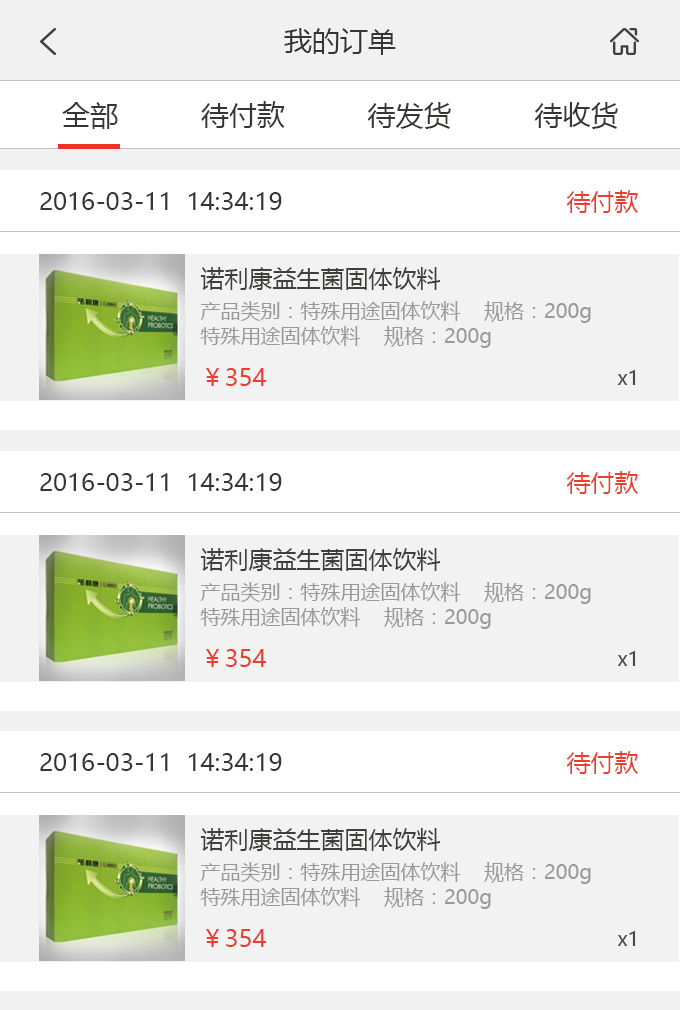
<style>
.page{position:relative;width:680px;height:1010px;background:#ffffff}
.page>*{position:absolute;margin:0}
.t1{font:28px "MicrosoftYaHei";color:#363533}
.t2{font:24px "MicrosoftYaHei";color:#363533}
.t3{font:24px "MicrosoftYaHei";color:#eb3d32}
.t4{font:24px "MicrosoftYaHei";color:#403f3d}
.t5{font:20px/25px "MicrosoftYaHei";color:#999999}
.t6{font:20px "MicrosoftYaHei";color:#4a4947}
</style>
<div class="page">
<p class="t1" style="left:284px;top:28px;width:112px;height:27px">我的订单</p>
<p class="t1" style="left:62px;top:101px;width:556px;height:28px">全部          待付款          待发货          待收货</p>
<p class="t2" style="left:40px;top:192px;width:242px;height:18px">2016-03-11  14:34:19</p>
<p class="t3" style="left:566px;top:190px;width:72px;height:23px">待付款</p>
<p class="t4" style="left:200px;top:267px;width:241px;height:23px">诺利康益生菌固体饮料</p>
<p class="t5" style="left:200px;top:301px;width:391px;height:47px">产品类别：特殊用途固体饮料    规格：200g<br>特殊用途固体饮料    规格：200g</p>
<p class="t3" style="left:206px;top:368px;width:61px;height:18px">￥354</p>
<p class="t6" style="left:617px;top:370px;width:19px;height:15px">x1</p>
<p class="t2" style="left:40px;top:473px;width:242px;height:18px">2016-03-11  14:34:19</p>
<p class="t3" style="left:566px;top:471px;width:72px;height:23px">待付款</p>
<p class="t4" style="left:200px;top:548px;width:241px;height:23px">诺利康益生菌固体饮料</p>
<p class="t5" style="left:200px;top:582px;width:391px;height:47px">产品类别：特殊用途固体饮料    规格：200g<br>特殊用途固体饮料    规格：200g</p>
<p class="t3" style="left:206px;top:649px;width:61px;height:18px">￥354</p>
<p class="t6" style="left:617px;top:651px;width:19px;height:15px">x1</p>
<p class="t2" style="left:40px;top:753px;width:242px;height:18px">2016-03-11  14:34:19</p>
<p class="t3" style="left:566px;top:751px;width:72px;height:23px">待付款</p>
<p class="t4" style="left:200px;top:828px;width:241px;height:23px">诺利康益生菌固体饮料</p>
<p class="t5" style="left:200px;top:862px;width:391px;height:47px">产品类别：特殊用途固体饮料    规格：200g<br>特殊用途固体饮料    规格：200g</p>
<p class="t3" style="left:206px;top:929px;width:61px;height:18px">￥354</p>
<p class="t6" style="left:617px;top:931px;width:19px;height:15px">x1</p>
</div>
